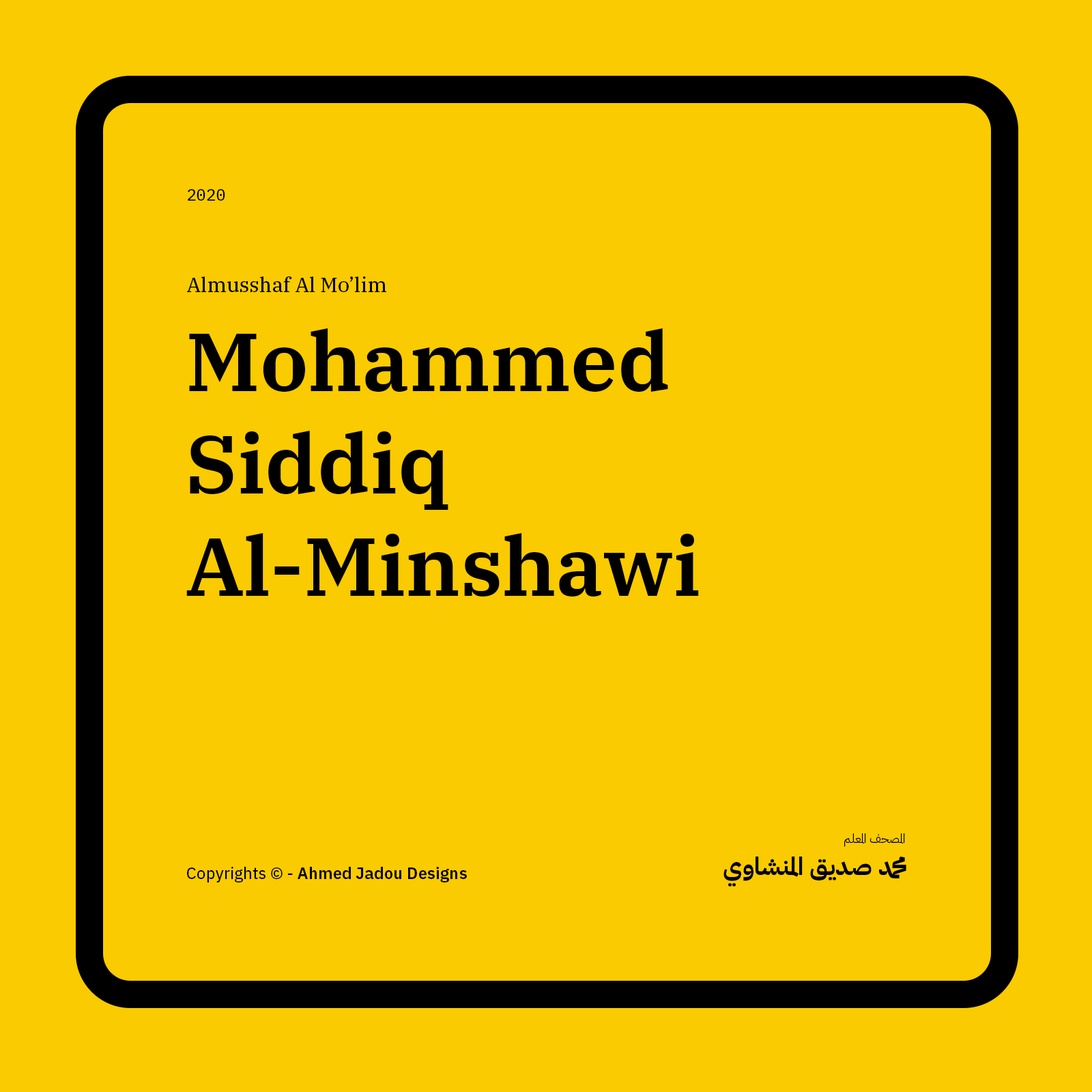
<style>
.page{position:relative;width:1092px;height:1092px;background:#facb00}
.page>*{position:absolute;margin:0}
.t1{font:16.4px "IBMPlexMono-Text";color:#000000}
.t2{font:20.5px "IBMPlexSerif-Text";color:#000000}
.t3{font:81.9px/102.7px "IBMPlexSerif-SemiBold";color:#000000}
.t4{font:12.3px "IBMPlexArabic-Light";color:#000000}
.t5{font:24.6px "IBMPlexArabic-Bold";color:#000000}
.t6{font:16.4px "IBMPlexSans-SemiBold";color:#000000}
.t7{font:16.4px "IBMPlexSans-Text";color:#000000}
</style>
<div class="page">
<p class="t1" style="left:188px;top:189px;width:37px;height:12px">2020</p>
<p class="t2" style="left:187px;top:276px;width:199px;height:16px">Almusshaf Al Mo’lim</p>
<p class="t3" style="left:186px;top:328px;width:513px;height:268px">Mohammed Siddiq Al-Minshawi</p>
<p class="t4" style="left:844px;top:833px;width:61px;height:14px">المصحف المعلم</p>
<p class="t5" style="left:723px;top:857px;width:183px;height:30px">محمد صديق المنشاوي</p>
<p class="t6" style="left:187px;top:867px;width:280px;height:15px"><span class="t7">Copyrights © - </span>Ahmed Jadou Designs</p>
</div>
